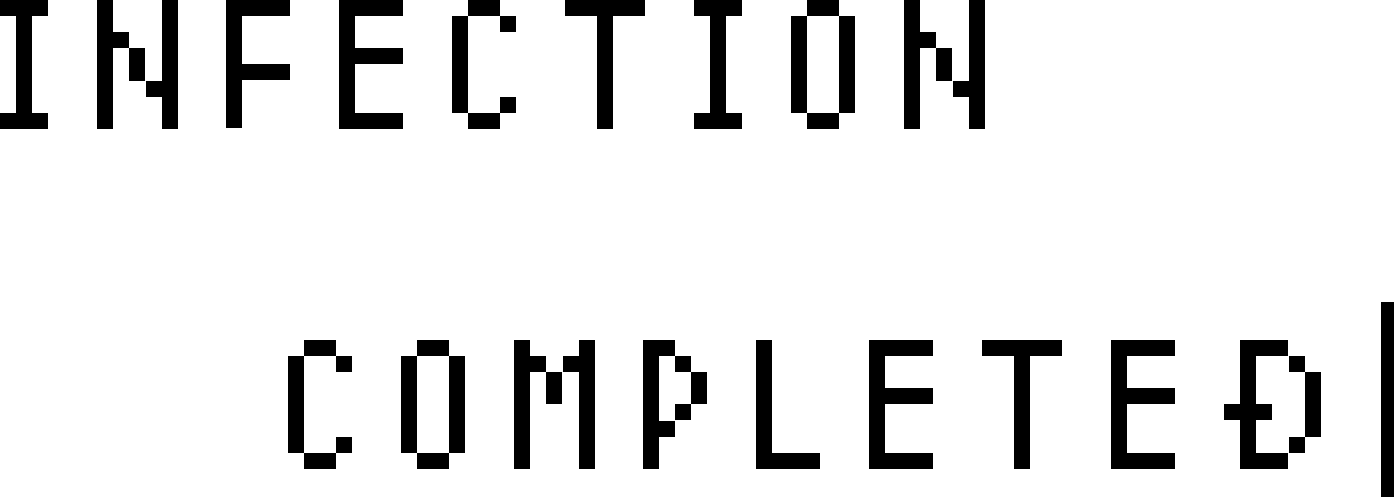
<style>
.page{position:relative;width:1394px;height:497px;background:#ffffff}
.page>*{position:absolute;margin:0}
.t1{font:194.4px "JackeyFont";color:#000000}
</style>
<div class="page">
<p class="t1" style="left:0px;top:0px;width:1321px;height:469px">INFECTION<br>        COMPLETED</p>
</div>
